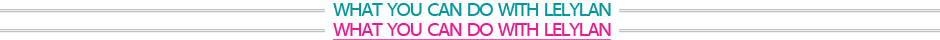
<style>
.page{position:relative;width:940px;height:40px;background:#ffffff}
.page>*{position:absolute;margin:0}
.t1{font:20px "MyriadWebPro";letter-spacing:-0.075em;color:#00979d}
.t2{font:20px "MyriadWebPro";letter-spacing:-0.075em;color:#ea198f;text-decoration:underline}
</style>
<div class="page">
<p class="t1" style="left:333px;top:3px;width:278px;height:13px">WHAT  YOU  CAN  DO  WITH  LELYLAN</p>
<p class="t2" style="left:333px;top:23px;width:278px;height:18px">WHAT  YOU  CAN  DO  WITH  LELYLAN</p>
</div>
